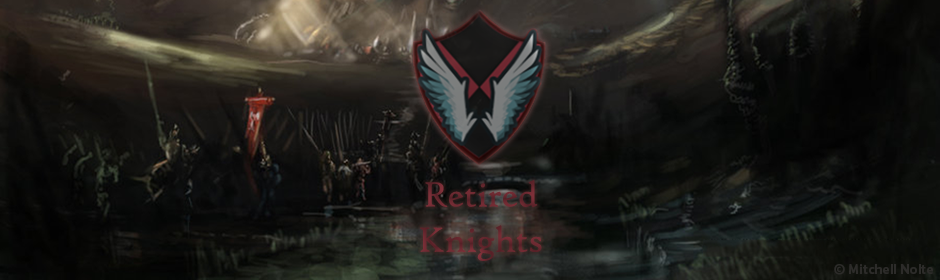
<style>
.page{position:relative;width:940px;height:280px}
.page>*{position:absolute;margin:0}
.t1{font:37.7px "HighTowerText-Reg";color:#6a2830}
.t2{font:14.1px "FSJack-Bold";color:#2c2b29}
</style>
<div class="page">
<p class="t1" style="left:420px;top:180px;width:122px;height:81px;text-align:center">Retired<br>Knights</p>
<p class="t2" style="left:834px;top:264px;width:99px;height:11px">© Mitchell Nolte</p>
</div>
